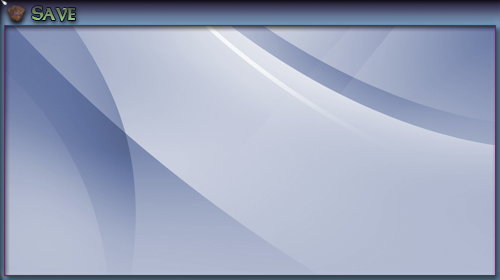
<style>
.page{position:relative;width:500px;height:280px}
.page>*{position:absolute;margin:0}
.t1{font:20px "LHFUncialCaps"}
</style>
<div class="page">
<p class="t1" style="left:32px;top:6px;width:43px;height:15px">Save</p>
</div>
